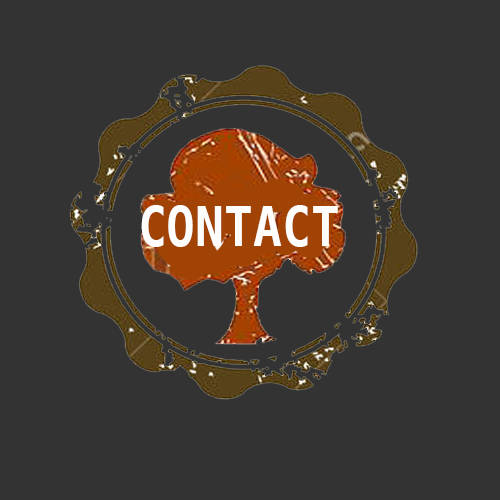
<style>
.page{position:relative;width:500px;height:500px;background:#333333}
.page>*{position:absolute;margin:0}
.t1{font:55px "Menlo-Bold";color:#fffdfb;scale:0.87 1}
</style>
<div class="page">
<p class="t1" style="left:141px;top:205px;width:197px;height:42px">CONTACT</p>
</div>
